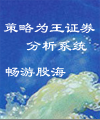
<style>
.page{position:relative;width:100px;height:120px}
.page>*{position:absolute;margin:0}
.t1{font:15.3px "Á¥Êé-Regular";color:#ffffff}
</style>
<div class="page">
<p class="t1" style="left:3px;top:23px;width:92px;height:28px">策略为王证券<br>   分析系统</p>
<p class="t1" style="left:5px;top:67px;width:61px;height:10px">畅游股海</p>
</div>
